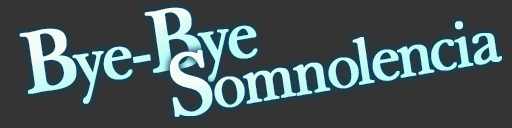
<style>
.page{position:relative;width:512px;height:128px;background:#333333}
.page>*{position:absolute;margin:0}
.t1{font:78.3px "BaskervilleLight";letter-spacing:-0.06em;font-weight:bold;scale:0.93 1}
.t2{font:102.7px "BaskervilleLight";letter-spacing:-0.06em;font-weight:bold;scale:0.93 1}
.t3{font:74px "BaskervilleLight";letter-spacing:-0.06em;color:#c5fcf8;font-weight:bold;scale:0.93 1}
.t4{font:102.7px "BaskervilleLight";letter-spacing:-0.06em;color:#c5fcf8;font-weight:bold;scale:0.93 1}
</style>
<div class="page">
<p class="t1" style="left:19px;top:7px;width:239px;height:97px;rotate:-10deg"><span class="t2">B</span>ye-<span class="t2">B</span>ye</p>
<p class="t3" style="left:170px;top:21px;width:332px;height:96px;rotate:-10deg"><span class="t4">S</span>omnolencia</p>
</div>
